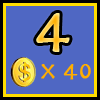
<style>
.page{position:relative;width:100px;height:100px;background:#4f67c3}
.page>*{position:absolute;margin:0}
.t1{font:60px "Herculanum";font-weight:bold}
.t2{font:24px "Herculanum";color:#ffae00;font-weight:bold}
</style>
<div class="page">
<p class="t1" style="left:36px;top:13px;width:34px;height:39px">4</p>
<p class="t2" style="left:41px;top:64px;width:50px;height:16px">x 40</p>
</div>
